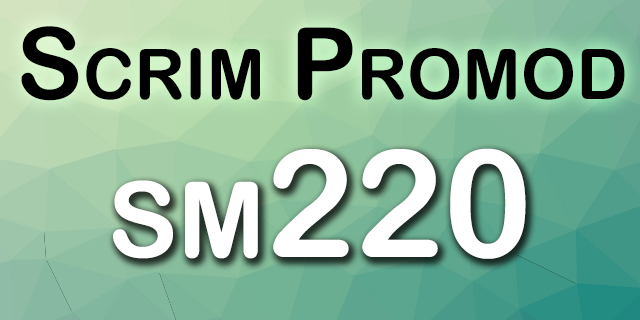
<style>
.page{position:relative;width:640px;height:320px}
.page>*{position:absolute;margin:0}
.t1{font:100px "ArialRoundedMTBold";color:#000000;font-variant:small-caps}
.t2{font:150px "ArialRoundedMTBold";color:#ffffff;font-variant:small-caps}
</style>
<div class="page">
<p class="t1" style="left:21px;top:26px;width:604px;height:75px">Scrim Promod</p>
<p class="t2" style="left:113px;top:148px;width:413px;height:111px">sm220</p>
</div>
